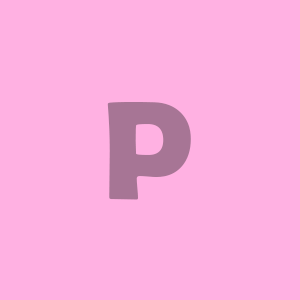
<style>
.page{position:relative;width:300px;height:300px;background:#ffb1e2}
.page>*{position:absolute;margin:0}
.t1{font:141.1px "BerlinSansFBDemi-Bold";color:#a77595}
</style>
<div class="page">
<p class="t1" style="left:107px;top:102px;width:84px;height:98px">P</p>
</div>
